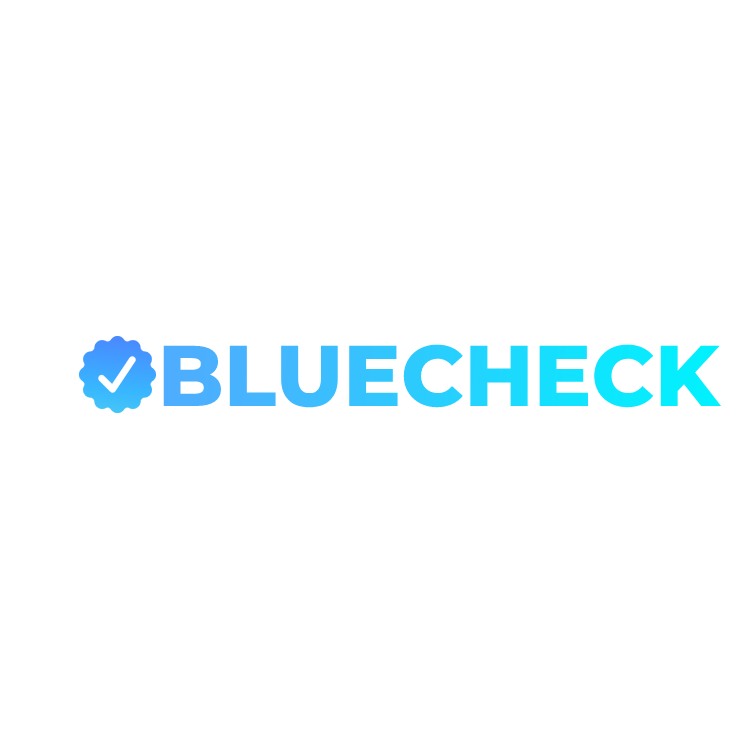
<style>
.page{position:relative;width:750px;height:750px;background:#ffffff}
.page>*{position:absolute;margin:0}
.t1{font:86px "Montserrat-ExtraBold"}
</style>
<div class="page">
<p class="t1" style="left:163px;top:344px;width:558px;height:64px">BLUECHECK</p>
</div>
